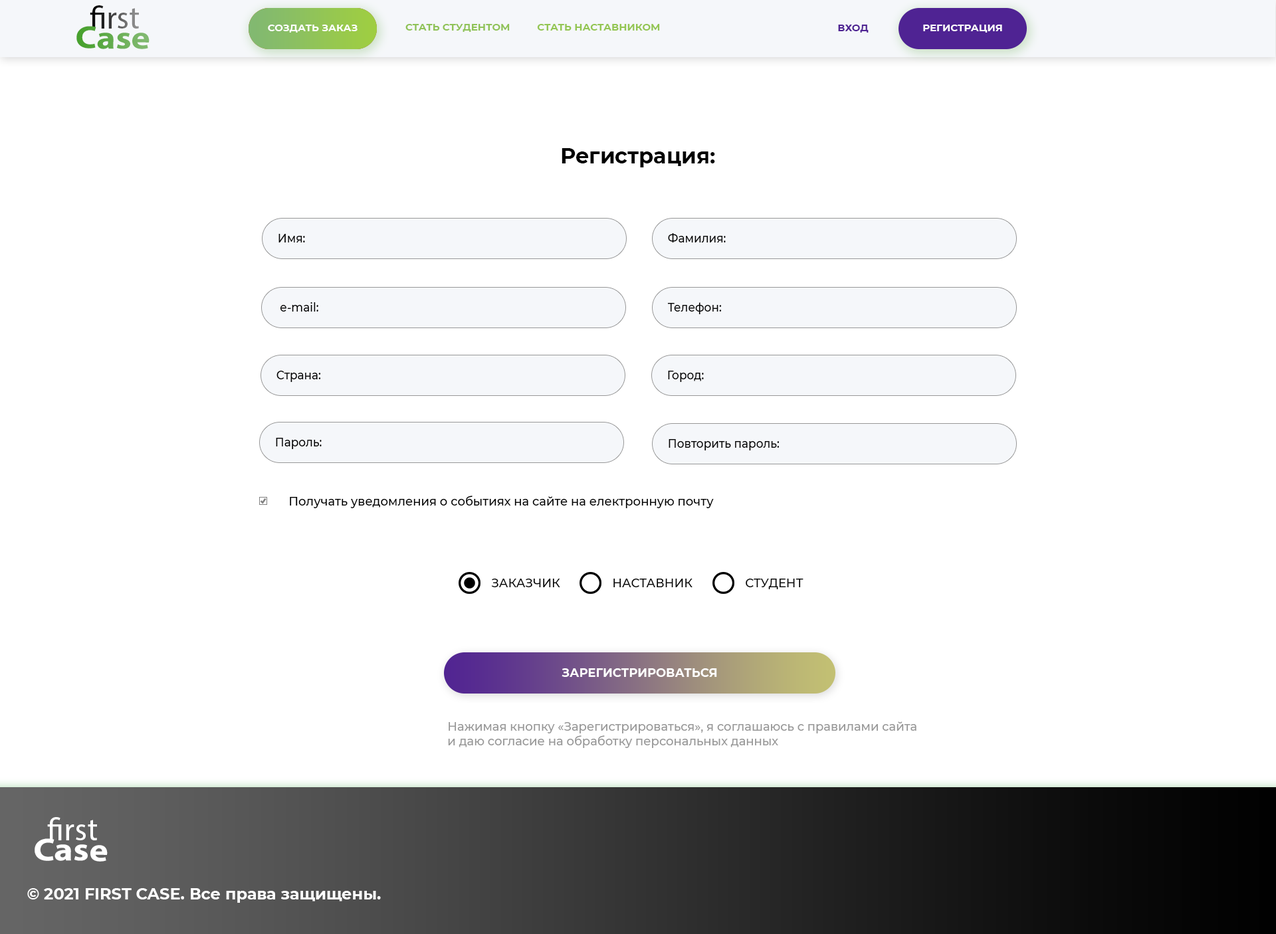
<style>
.page{position:relative;width:1276px;height:934px;background:#ffffff}
.page>*{position:absolute;margin:0}
.t1{font:31.9px "MyriadPro-Regular"}
.t2{font:31.9px "MyriadPro-Bold";scale:1.13 1}
.t3{font:31.9px "MyriadPro-Regular";scale:1.13 1}
.t4{font:10px "Montserrat-Bold";color:#ffffff;text-transform:uppercase}
.t5{font:10px "Montserrat-Bold";color:#8fc358;text-transform:uppercase}
.t6{font:10px "Montserrat-Bold";color:#93c652;text-transform:uppercase}
.t7{font:10px "Montserrat-Bold";color:#4f2393;text-transform:uppercase}
.t8{font:21.3px "Montserrat-Bold";color:#000000}
.t9{font:12px "Montserrat-Medium";color:#000000;scale:0.94 1}
.t10{font:12px "Montserrat-Medium";color:#000000}
.t11{font:12px "Montserrat-Medium";color:#000000;text-transform:uppercase}
.t12{font:12px "Montserrat-Bold";color:#ffffff;text-transform:uppercase}
.t13{font:12px "Montserrat-Medium";color:#989898}
.t14{font:31.9px "MyriadPro-Regular";color:#ffffff}
.t15{font:31.9px "MyriadPro-Bold";color:#ffffff;scale:1.13 1}
.t16{font:31.9px "MyriadPro-Regular";color:#ffffff;scale:1.13 1}
.t17{font:16px "Montserrat-Bold";color:#ffffff}
</style>
<div class="page">
<p class="t1" style="left:90px;top:5px;width:49px;height:24px">first</p>
<p class="t2" style="left:76px;top:26px;width:74px;height:23px;rotate:1deg"><span class="t3">       </span>Case</p>
<p class="t4" style="left:268px;top:25px;width:90px;height:8px">Создать заказ</p>
<p class="t5" style="left:405px;top:24px;width:105px;height:8px">стать студентом</p>
<p class="t6" style="left:537px;top:24px;width:123px;height:7px">СТАТЬ наставником</p>
<p class="t7" style="left:838px;top:25px;width:31px;height:8px">ВХОД</p>
<p class="t4" style="left:923px;top:25px;width:79px;height:8px">РЕГИСТРАЦИЯ</p>
<p class="t8" style="left:562px;top:148px;width:153px;height:19px">Регистрация:</p>
<p class="t9" style="left:278px;top:234px;width:27px;height:9px">Имя:</p>
<p class="t9" style="left:668px;top:233px;width:58px;height:10px">Фамилия:</p>
<p class="t9" style="left:280px;top:302px;width:38px;height:10px">e-mail:</p>
<p class="t9" style="left:667px;top:302px;width:55px;height:12px">Телефон:</p>
<p class="t9" style="left:276px;top:371px;width:45px;height:11px">Страна:</p>
<p class="t9" style="left:668px;top:371px;width:36px;height:11px">Город:</p>
<p class="t9" style="left:276px;top:438px;width:46px;height:11px">Пароль:</p>
<p class="t9" style="left:669px;top:439px;width:111px;height:12px">Повторить пароль:</p>
<p class="t10" style="left:290px;top:496px;width:424px;height:12px">Получать уведомления о событиях на сайте на електронную почту</p>
<p class="t11" style="left:491px;top:579px;width:69px;height:9px">Заказчик</p>
<p class="t11" style="left:613px;top:579px;width:80px;height:9px">наставник</p>
<p class="t11" style="left:746px;top:579px;width:58px;height:11px">студент</p>
<p class="t12" style="left:562px;top:669px;width:155px;height:8px">ЗАРЕГИСТРИРОВАТЬСЯ</p>
<p class="t13" style="left:448px;top:722px;width:469px;height:26px">Нажимая кнопку «Зарегистрироваться», я соглашаюсь с правилами сайта <br>и даю согласие на обработку персональных данных</p>
<p class="t14" style="left:47px;top:817px;width:50px;height:24px">first</p>
<p class="t15" style="left:35px;top:839px;width:73px;height:23px;rotate:1deg"><span class="t16">       </span>Case</p>
<p class="t17" style="left:27px;top:889px;width:354px;height:14px">© 2021 FIRST CASE. Все права защищены.</p>
</div>
